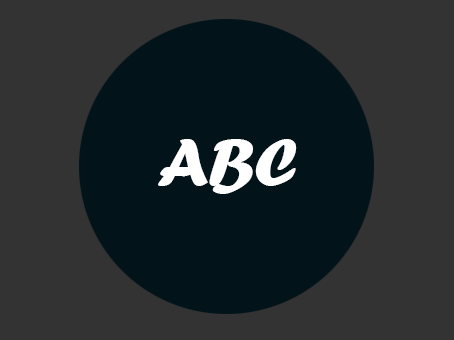
<style>
.page{position:relative;width:454px;height:340px;background:#333333}
.page>*{position:absolute;margin:0}
.t1{font:70px "ForteMT";color:#ffffff}
</style>
<div class="page">
<p class="t1" style="left:158px;top:139px;width:139px;height:55px">ABC</p>
</div>
